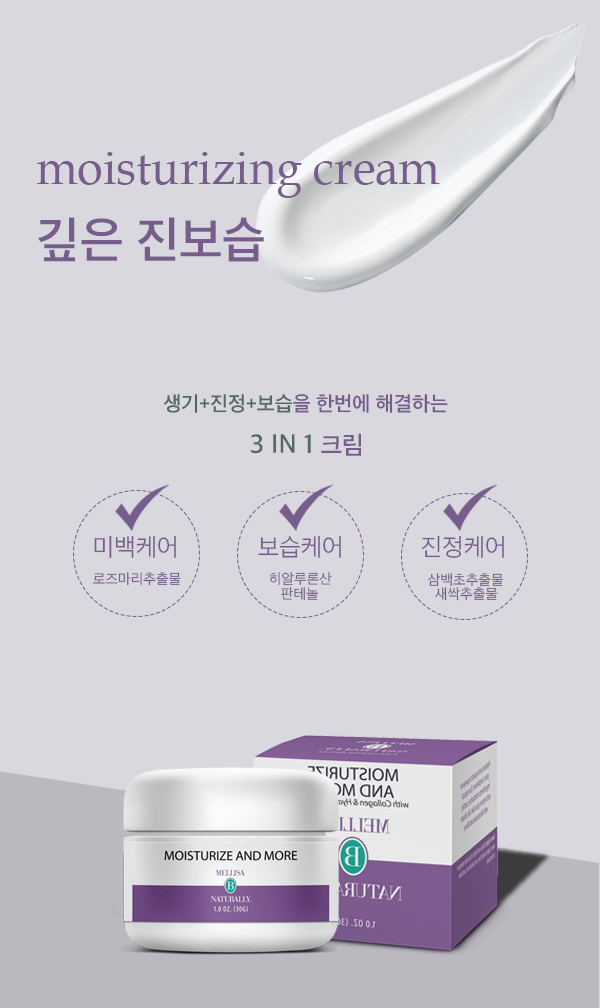
<style>
.page{position:relative;width:600px;height:1008px;background:#d9d8de}
.page>*{position:absolute;margin:0}
.t1{font:11.2px "BookAntiqua";color:#765d8b}
.t2{font:12px "AppleSDGothicNeoSB00";color:#765d8b}
.t3{font:20.8px "AppleSDGothicNeoSB00";color:#765d8b}
.t4{font:20.8px "AppleSDGothicNeoSB00";color:#526b5e}
.t5{font:27.1px "AppleSDGothicNeoSB00";color:#536b5f}
.t6{font:25px "AppleSDGothicNeoSB00";color:#765d8b}
.t7{font:25px "AppleSDGothicNeoL00";color:#765d8b}
.t8{font:14.6px "AppleSDGothicNeoL00";color:#765d8b}
</style>
<div class="page">
<p class="t1" style="left:37px;top:152px;width:403px;height:46px">moisturizing cream</p>
<p class="t2" style="left:38px;top:217px;width:226px;height:45px">깊은 진보습</p>
<p class="t3" style="left:164px;top:394px;width:284px;height:19px"><span class="t4">생기+진정+보습</span>을 한번에 해결하는</p>
<p class="t5" style="left:250px;top:433px;width:111px;height:23px">3 IN 1<span class="t6"> 크림</span></p>
<p class="t7" style="left:94px;top:535px;width:82px;height:23px">미백케어</p>
<p class="t7" style="left:258px;top:536px;width:83px;height:22px">보습케어</p>
<p class="t7" style="left:421px;top:535px;width:83px;height:23px">진정케어</p>
<p class="t8" style="left:93px;top:572px;width:88px;height:14px">로즈마리추출물</p>
<p class="t8" style="left:269px;top:572px;width:63px;height:14px">히알루론산</p>
<p class="t8" style="left:428px;top:573px;width:76px;height:14px">삼백초추출물</p>
<p class="t8" style="left:281px;top:587px;width:38px;height:14px">판테놀</p>
<p class="t8" style="left:435px;top:587px;width:63px;height:14px">새싹추출물</p>
</div>
